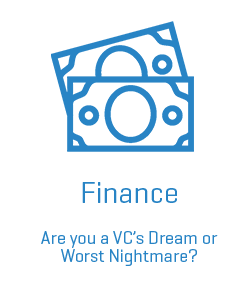
<style>
.page{position:relative;width:250px;height:300px;background:#ffffff}
.page>*{position:absolute;margin:0}
.t1{font:30px "Geogrotesque-Regular";color:#2884c5}
.t2{font:18px/18px "Geogrotesque-Regular";color:#2884c5}
</style>
<div class="page">
<p class="t1" style="left:82px;top:182px;width:95px;height:21px">Finance</p>
<p class="t2" style="left:41px;top:231px;width:177px;height:35px;text-align:center">Are you a VC’s Dream or Worst Nightmare?</p>
</div>
